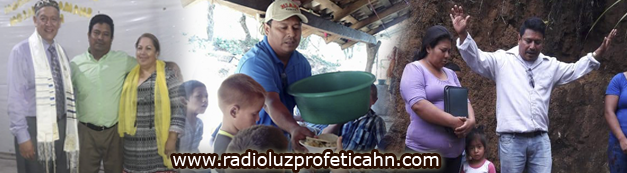
<style>
.page{position:relative;width:627px;height:173px}
.page>*{position:absolute;margin:0}
.t1{font:18px "Verdana";color:#ffffff}
</style>
<div class="page">
<p class="t1" style="left:173px;top:152px;width:266px;height:18px">www.radioluzprofeticahn.com</p>
</div>
